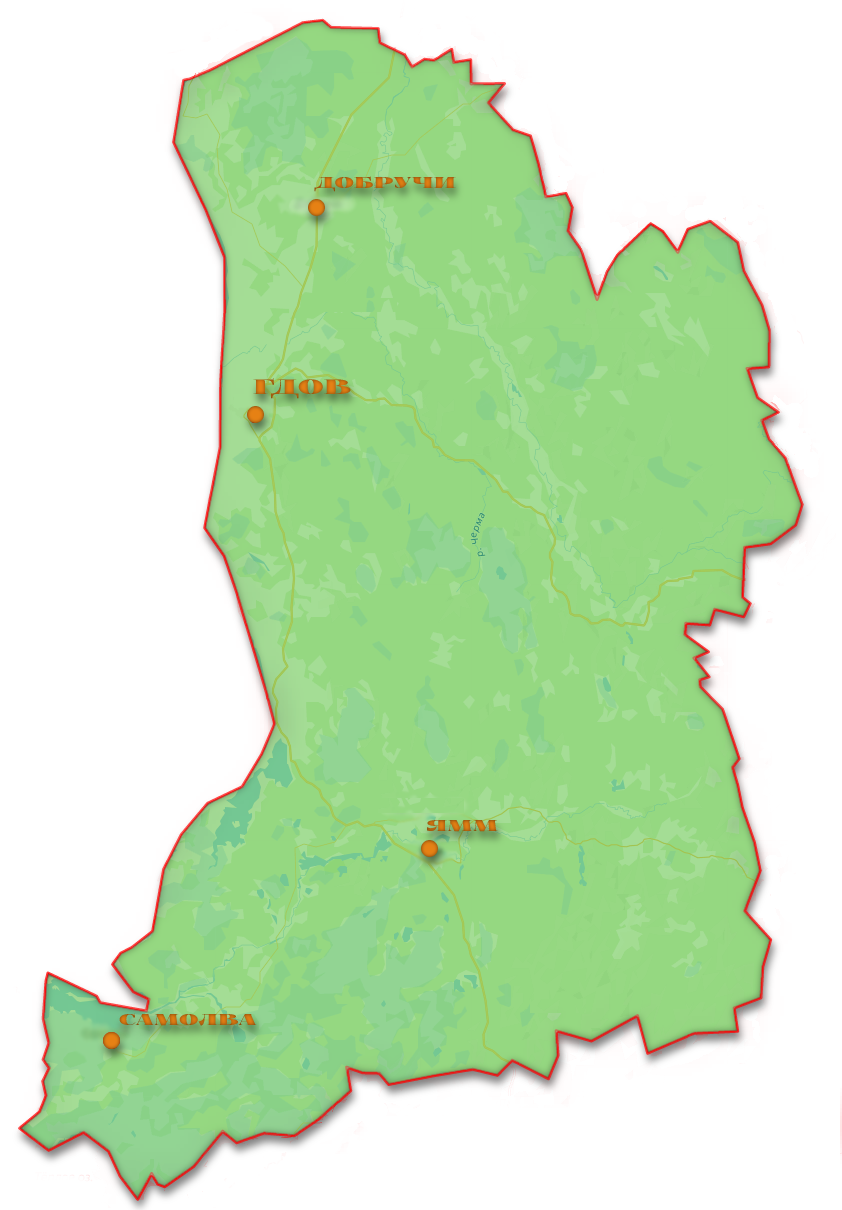
<style>
.page{position:relative;width:842px;height:1210px;background:#ffffff}
.page>*{position:absolute;margin:0}
.t1{font:24px "FoglihtenBlackPcs";color:#c66f11}
.t2{font:32px "FoglihtenBlackPcs";color:#cd7312}
.t3{font:24px "FoglihtenBlackPcs"}
</style>
<div class="page">
<p class="t1" style="left:314px;top:176px;width:142px;height:16px">добручи</p>
<p class="t2" style="left:253px;top:378px;width:98px;height:21px">Гдов</p>
<p class="t3" style="left:427px;top:820px;width:71px;height:12px">Ямм</p>
<p class="t1" style="left:119px;top:1013px;width:138px;height:13px">самолва</p>
</div>
